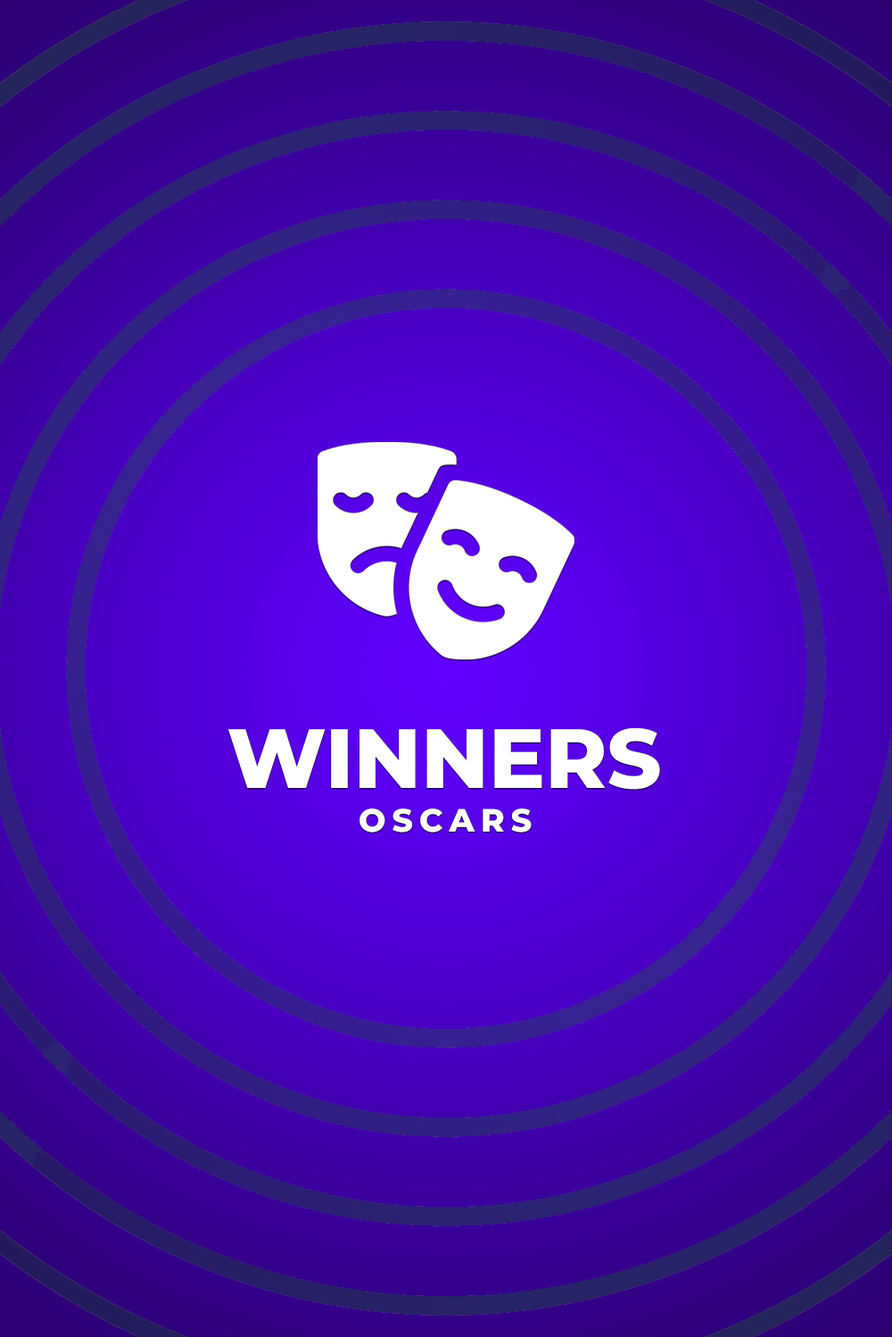
<style>
.page{position:relative;width:892px;height:1337px}
.page>*{position:absolute;margin:0}
.t1{font:83.8px "MontserratRoman-ExtraBold";color:#ffffff}
.t2{font:32.1px "MontserratRoman-ExtraBold";letter-spacing:0.2em;color:#ffffff}
</style>
<div class="page">
<p class="t1" style="left:228px;top:728px;width:432px;height:62px">WINNERS</p>
<p class="t2" style="left:359px;top:809px;width:172px;height:24px">OSCARS</p>
</div>
